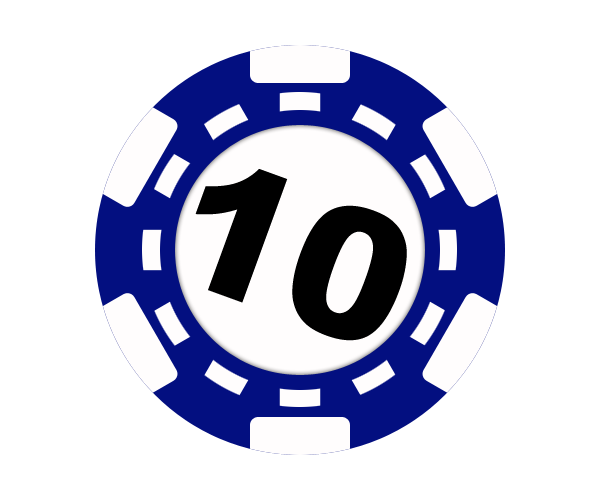
<style>
.page{position:relative;width:600px;height:500px;background:#ffffff}
.page>*{position:absolute;margin:0}
.t1{font:180px "Arial-Black";color:#000000}
</style>
<div class="page">
<p class="t1" style="left:195px;top:169px;width:212px;height:172px;rotate:20deg">10</p>
</div>
